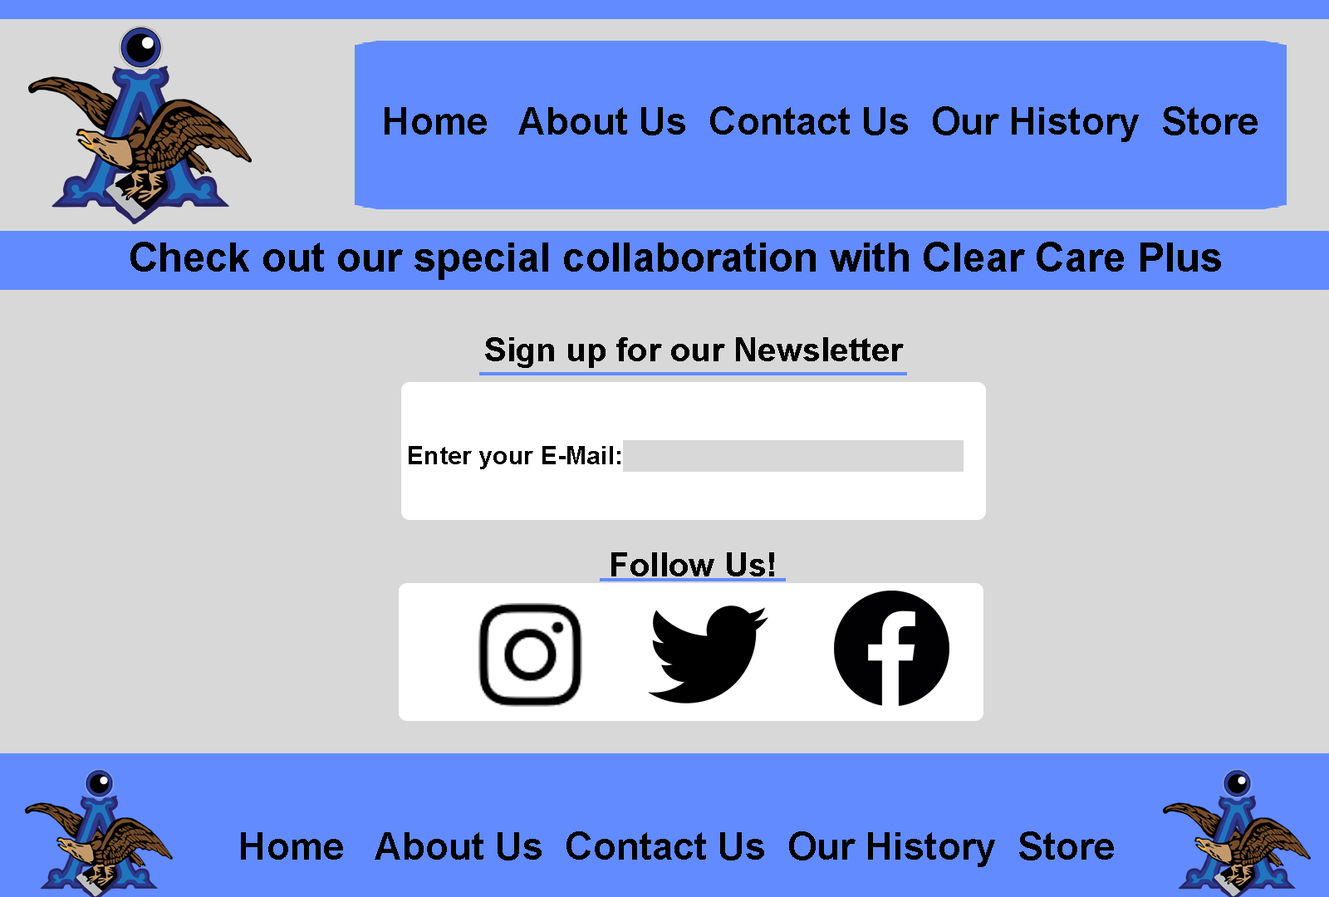
<style>
.page{position:relative;width:1329px;height:897px;background:#d8d8d8}
.page>*{position:absolute;margin:0}
.t1{font:38.1px "Arial-BoldMT";color:#000000}
.t2{font:40.7px "Arial-BoldMT";color:#000000}
.t3{font:33.5px "Arial-BoldMT";color:#000000}
.t4{font:25.3px "Arial-BoldMT";color:#000000}
</style>
<div class="page">
<p class="t1" style="left:385px;top:106px;width:873px;height:36px">Home   About Us  Contact Us  Our History  Store</p>
<p class="t2" style="left:130px;top:242px;width:1091px;height:38px">Check out our special collaboration with Clear Care Plus</p>
<p class="t3" style="left:485px;top:337px;width:419px;height:31px">Sign up for our Newsletter</p>
<p class="t4" style="left:409px;top:446px;width:212px;height:23px">Enter your E-Mail:</p>
<p class="t3" style="left:611px;top:552px;width:163px;height:25px">Follow Us!</p>
<p class="t1" style="left:241px;top:832px;width:873px;height:35px">Home   About Us  Contact Us  Our History  Store</p>
</div>
